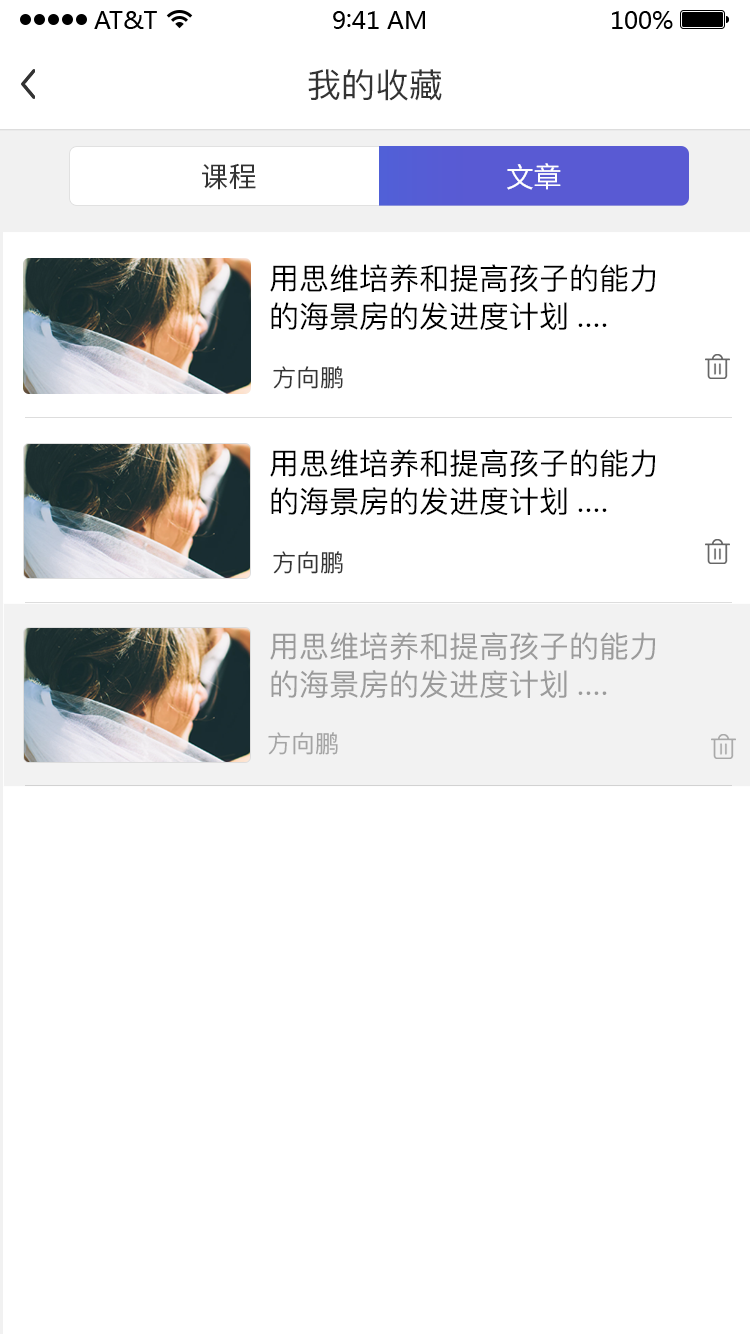
<style>
.page{position:relative;width:750px;height:1334px;background:#ffffff}
.page>*{position:absolute;margin:0}
.t1{font:34px "PingFang-SC-Medium";color:#333333}
.t2{font:28px "SourceHanSansCN-Regular";color:#333333}
.t3{font:28px "SourceHanSansCN-Regular";color:#ffffff}
.t4{font:30px/38px "PingFang-SC-Medium";color:#000000}
.t5{font:24px "PingFang-SC-Medium";color:#333333}
.t6{font:30px/38px "PingFang-SC-Medium";color:#9b9b9b}
.t7{font:24px "PingFang-SC-Medium";color:#a4a4a4}
</style>
<div class="page">
<p class="t1" style="left:308px;top:69px;width:134px;height:32px">我的收藏</p>
<p class="t2" style="left:202px;top:163px;width:54px;height:27px">课程</p>
<p class="t3" style="left:507px;top:163px;width:54px;height:27px">文章</p>
<p class="t4" style="left:270px;top:264px;width:386px;height:66px">用思维培养和提高孩子的能力<br>的海景房的发进度计划....</p>
<p class="t5" style="left:273px;top:366px;width:70px;height:23px">方向鹏</p>
<p class="t4" style="left:270px;top:449px;width:386px;height:66px">用思维培养和提高孩子的能力<br>的海景房的发进度计划....</p>
<p class="t5" style="left:273px;top:551px;width:70px;height:23px">方向鹏</p>
<p class="t6" style="left:270px;top:632px;width:386px;height:66px">用思维培养和提高孩子的能力<br>的海景房的发进度计划....</p>
<p class="t7" style="left:268px;top:732px;width:70px;height:23px">方向鹏</p>
</div>
